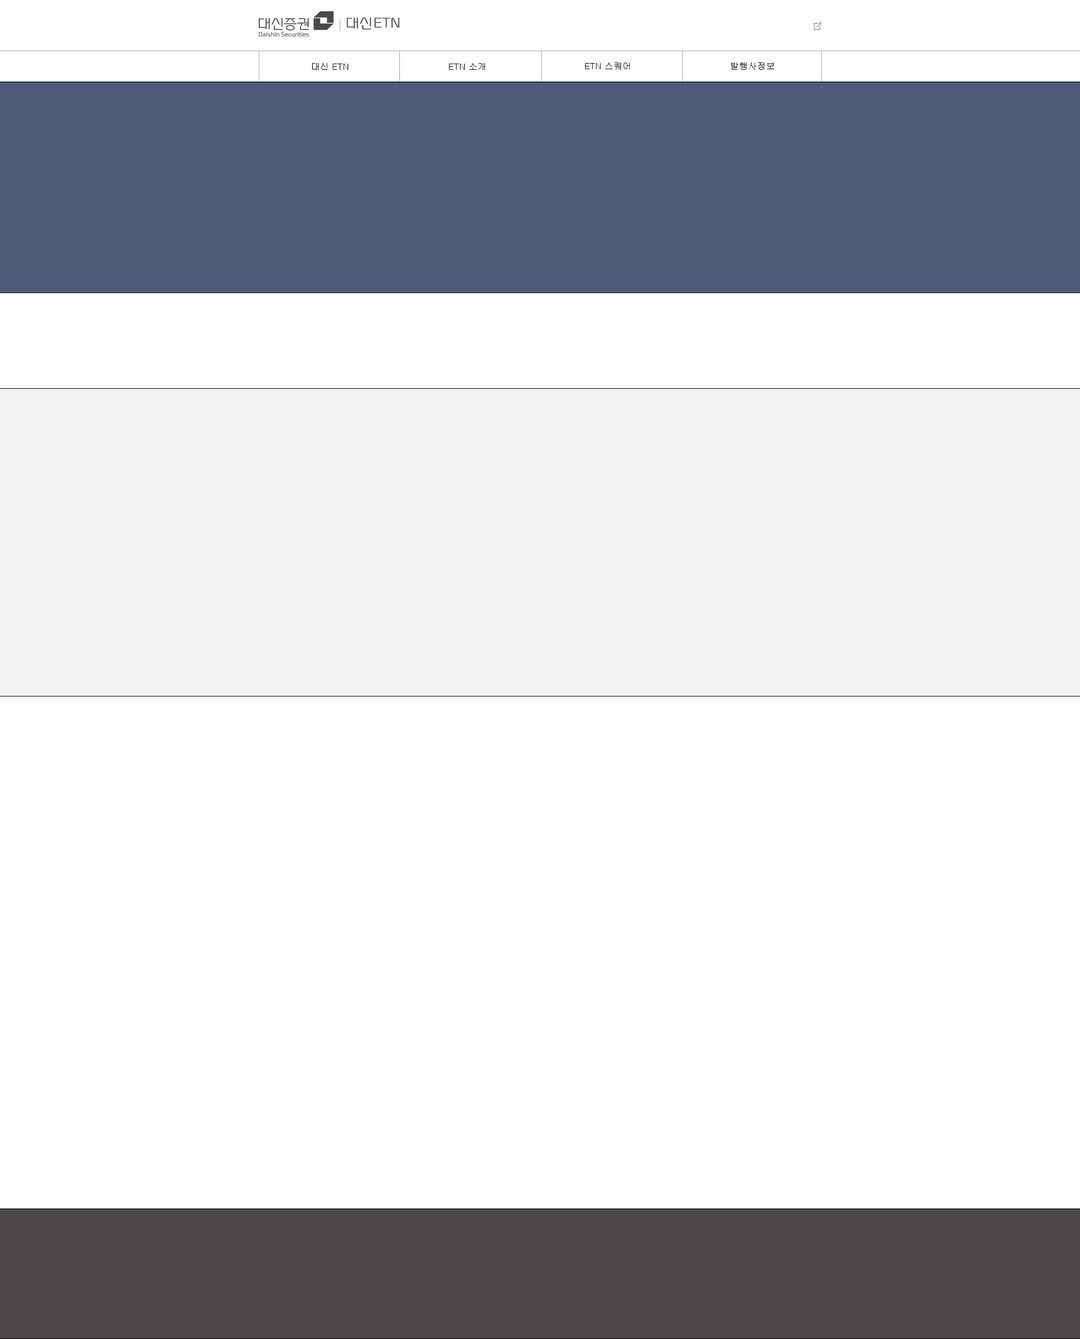
<style>
.page{position:relative;width:1080px;height:1339px;background:#ffffff}
.page>*{position:absolute;margin:0}
.t1{font:9px "Gulim";color:#000000}
</style>
<div class="page">
<p class="t1" style="left:312px;top:63px;width:37px;height:7px">대신 ETN</p>
<p class="t1" style="left:449px;top:63px;width:36px;height:7px">ETN 소개</p>
<p class="t1" style="left:585px;top:62px;width:45px;height:8px">ETN 스퀘어</p>
<p class="t1" style="left:731px;top:62px;width:44px;height:8px">발행사정보</p>
</div>
